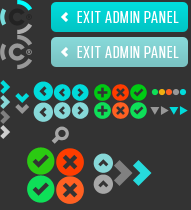
<style>
.page{position:relative;width:191px;height:210px;background:#333333}
.page>*{position:absolute;margin:0}
.t1{font:17px "ChromadicaCondensed";letter-spacing:0.06em;color:#ffffff}
</style>
<div class="page">
<p class="t1" style="left:77px;top:11px;width:102px;height:12px">EXIT ADMIN PANEL</p>
<p class="t1" style="left:77px;top:46px;width:102px;height:12px">EXIT ADMIN PANEL</p>
</div>
